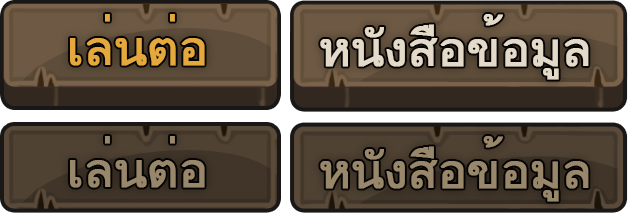
<style>
.page{position:relative;width:628px;height:213px}
.page>*{position:absolute;margin:0}
.t1{font:48.6px "Loma";letter-spacing:-0.025em;color:#e5a83d;text-transform:uppercase;font-weight:bold}
.t2{font:48.6px "Loma";letter-spacing:-0.025em;color:#e4dac9;text-transform:uppercase;font-weight:bold}
.t3{font:48.6px "Loma";letter-spacing:-0.025em;color:#98876a;text-transform:uppercase;font-weight:bold}
</style>
<div class="page">
<p class="t1" style="left:70px;top:14px;width:135px;height:52px">เล่นต่อ</p>
<p class="t2" style="left:320px;top:14px;width:269px;height:66px">หนังสือข้อมูล</p>
<p class="t3" style="left:70px;top:136px;width:135px;height:52px">เล่นต่อ</p>
<p class="t3" style="left:320px;top:136px;width:269px;height:66px">หนังสือข้อมูล</p>
</div>
